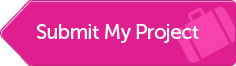
<style>
.page{position:relative;width:236px;height:66px;background:#df1e90}
.page>*{position:absolute;margin:0}
.t1{font:20px "MuseoSans-500";letter-spacing:-0.02em;color:#ffffff}
</style>
<div class="page">
<p class="t1" style="left:37px;top:24px;width:162px;height:19px">Submit My Project</p>
</div>
